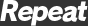
<style>
.page{position:relative;width:88px;height:26px;background:#333333}
.page>*{position:absolute;margin:0}
.t1{font:26.7px "RodinPro-EB";letter-spacing:-0.067em;color:#ffffff;font-style:italic}
</style>
<div class="page">
<p class="t1" style="left:0px;top:0px;width:88px;height:26px">Repeat</p>
</div>
